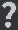
<style>
.page{position:relative;width:18px;height:30px;background:#333333}
.page>*{position:absolute;margin:0}
.t1{font:33.3px "NotoSansCJKkr-Bold";color:#c9c9c9}
</style>
<div class="page">
<p class="t1" style="left:2px;top:2px;width:14px;height:26px">?</p>
</div>
